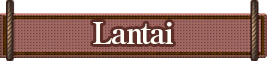
<style>
.page{position:relative;width:267px;height:61px;background:#ffffff}
.page>*{position:absolute;margin:0}
.t1{font:30px "RyuminPro-ExBold";letter-spacing:-0.08em;color:#fffff7}
</style>
<div class="page">
<p class="t1" style="left:93px;top:22px;width:80px;height:22px">Lantai</p>
</div>
